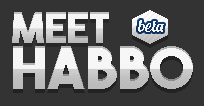
<style>
.page{position:relative;width:204px;height:106px;background:#333333}
.page>*{position:absolute;margin:0}
.t1{font:41.7px "TheBoldFont"}
.t2{font:16.7px "Lobster1.4";color:#f6f6f6}
.t3{font:58.3px "TheBoldFont"}
</style>
<div class="page">
<p class="t1" style="left:12px;top:12px;width:97px;height:31px">meet</p>
<p class="t2" style="left:138px;top:20px;width:26px;height:12px">beta</p>
<p class="t3" style="left:13px;top:46px;width:180px;height:43px">habbo</p>
</div>
